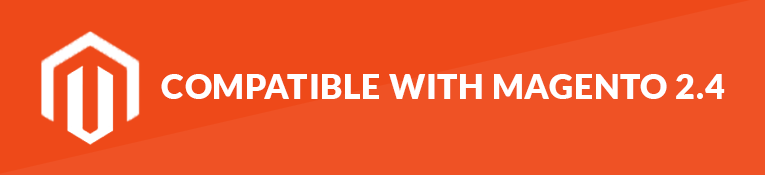
<style>
.page{position:relative;width:765px;height:175px;background:#ef5225}
.page>*{position:absolute;margin:0}
.t1{font:34px "Lato-Black";letter-spacing:0.02em;color:#ffffff;text-transform:uppercase}
</style>
<div class="page">
<p class="t1" style="left:161px;top:74px;width:564px;height:25px">Compatible WITH MAGENTO 2.4</p>
</div>
